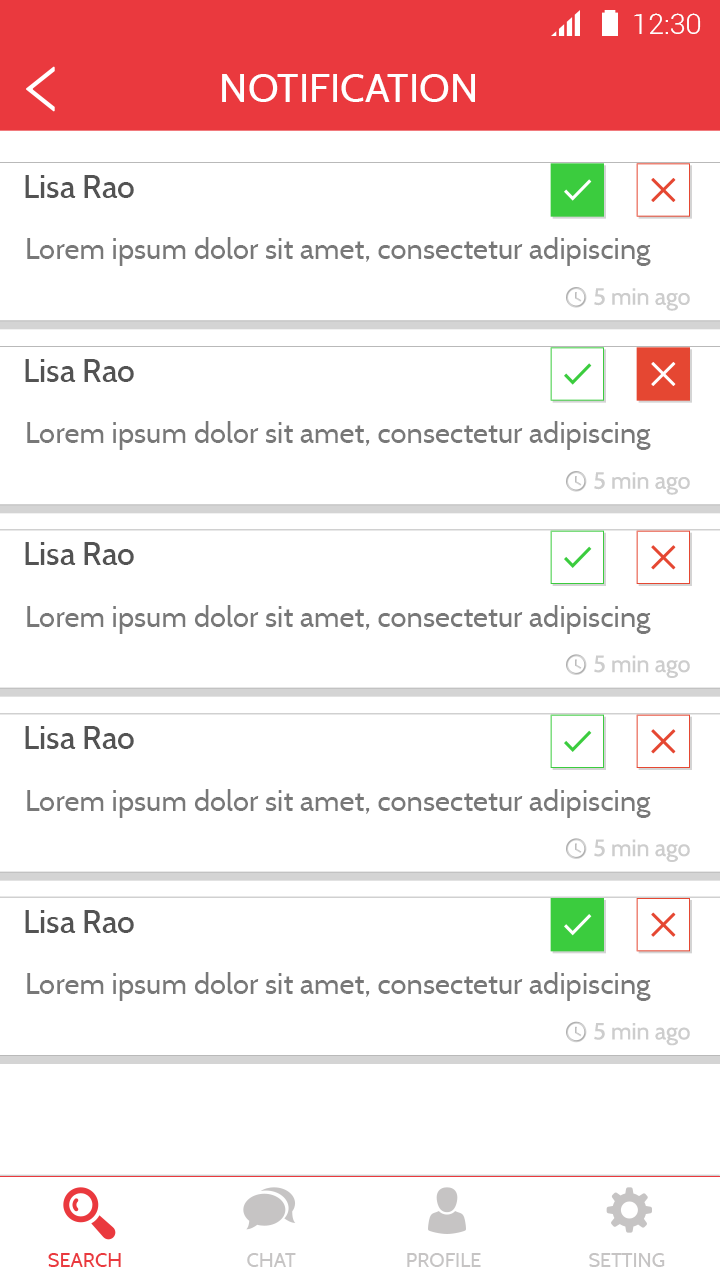
<style>
.page{position:relative;width:720px;height:1280px;background:#ffffff}
.page>*{position:absolute;margin:0}
.t1{font:28.4px "Roboto-Light";color:#ffffff}
.t2{font:40px "Cabin-Regular";color:#ffffff}
.t3{font:32.1px "Cabin-Medium";color:#535353}
.t4{font:29.3px "Cabin-Regular";color:#787878}
.t5{font:23.3px "Cabin-Regular";color:#cdcdcd}
.t6{font:20px "Cabin-Regular";color:#ea393e}
.t7{font:20px "Cabin-Regular";color:#c6c4c4}
</style>
<div class="page">
<p class="t1" style="left:634px;top:13px;width:67px;height:21px">12:30</p>
<p class="t2" style="left:222px;top:74px;width:253px;height:28px">NOTIFICATION</p>
<p class="t3" style="left:25px;top:175px;width:109px;height:23px">Lisa Rao</p>
<p class="t4" style="left:27px;top:237px;width:624px;height:29px">Lorem ipsum dolor sit amet, consectetur adipiscing</p>
<p class="t5" style="left:594px;top:288px;width:96px;height:23px">5 min ago</p>
<p class="t3" style="left:25px;top:359px;width:109px;height:23px">Lisa Rao</p>
<p class="t4" style="left:27px;top:421px;width:624px;height:29px">Lorem ipsum dolor sit amet, consectetur adipiscing</p>
<p class="t5" style="left:594px;top:472px;width:96px;height:23px">5 min ago</p>
<p class="t3" style="left:25px;top:542px;width:109px;height:23px">Lisa Rao</p>
<p class="t4" style="left:27px;top:605px;width:624px;height:29px">Lorem ipsum dolor sit amet, consectetur adipiscing</p>
<p class="t5" style="left:594px;top:655px;width:96px;height:23px">5 min ago</p>
<p class="t3" style="left:25px;top:726px;width:109px;height:23px">Lisa Rao</p>
<p class="t4" style="left:27px;top:789px;width:624px;height:29px">Lorem ipsum dolor sit amet, consectetur adipiscing</p>
<p class="t5" style="left:594px;top:839px;width:96px;height:23px">5 min ago</p>
<p class="t3" style="left:25px;top:910px;width:109px;height:23px">Lisa Rao</p>
<p class="t4" style="left:27px;top:972px;width:624px;height:29px">Lorem ipsum dolor sit amet, consectetur adipiscing</p>
<p class="t5" style="left:594px;top:1023px;width:96px;height:23px">5 min ago</p>
<p class="t6" style="left:48px;top:1253px;width:73px;height:14px">SEARCH</p>
<p class="t7" style="left:247px;top:1253px;width:49px;height:14px">CHAT</p>
<p class="t7" style="left:407px;top:1253px;width:74px;height:14px">PROFILE</p>
<p class="t7" style="left:589px;top:1253px;width:76px;height:14px">SETTING</p>
</div>
